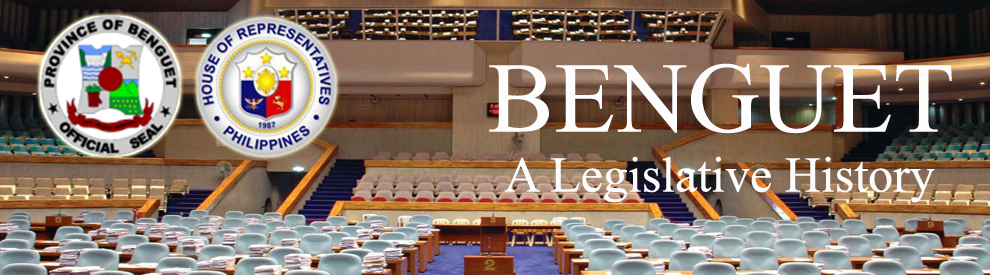
<style>
.page{position:relative;width:990px;height:275px}
.page>*{position:absolute;margin:0}
.t1{font:50px "TimesNewRomanPSMT";color:#fdfcfc}
.t2{font:100px "TimesNewRomanPSMT";color:#fdfdfd}
</style>
<div class="page">
<p class="t1" style="left:489px;top:63px;width:463px;height:140px;text-align:center"><span class="t2">BENGUET<br></span>A Legislative History</p>
</div>
